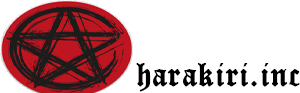
<style>
.page{position:relative;width:300px;height:93px;background:#ffffff}
.page>*{position:absolute;margin:0}
.t1{font:33.3px "OldEnglishTextMT";color:#000000;font-weight:bold}
</style>
<div class="page">
<p class="t1" style="left:136px;top:63px;width:164px;height:29px">harakiri.inc</p>
</div>
